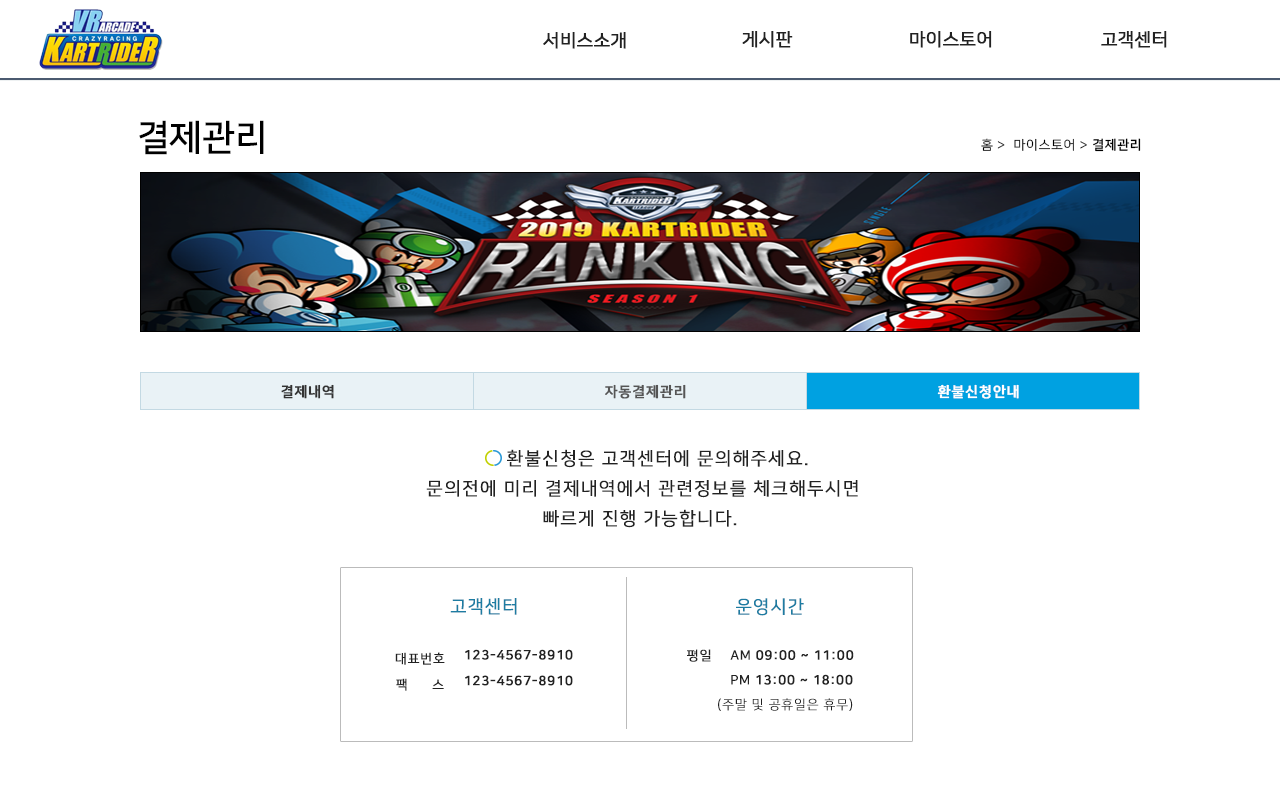
<style>
.page{position:relative;width:1280px;height:786px;background:#ffffff}
.page>*{position:absolute;margin:0}
.t1{font:18px "NanumSquareR";color:#222222;font-weight:bold}
.t2{font:36px "NanumSquareB";color:#000000}
.t3{font:13px "NanumSquareR";letter-spacing:0.05em;color:#000000}
.t4{font:13px "NanumSquareB";letter-spacing:0.05em;color:#000000}
.t5{font:14px "NanumSquareB";letter-spacing:0.05em;color:#333333;font-weight:bold}
.t6{font:14px "NanumSquareB";letter-spacing:0.05em;color:#555555;font-weight:bold}
.t7{font:14px "NanumSquareB";letter-spacing:0.05em;color:#ffffff;font-weight:bold}
.t8{font:18px/30px "NanumSquareR";letter-spacing:0.05em;color:#222222;text-transform:uppercase;font-weight:bold}
.t9{font:18px "NanumSquareR";letter-spacing:0.05em;color:#1d7ca2;text-transform:uppercase;font-weight:bold}
.t10{font:13px "NanumSquareR";letter-spacing:0.05em;color:#222222;text-transform:uppercase;font-weight:bold}
.t11{font:13px "NanumSquareB";letter-spacing:0.05em;color:#222222;text-transform:uppercase;font-weight:bold}
.t12{font:13px "NanumSquareR";letter-spacing:1.9em;color:#222222;text-transform:uppercase;font-weight:bold}
.t13{font:13px "NanumSquareL";letter-spacing:0.05em;color:#222222;text-transform:uppercase;font-weight:bold}
</style>
<div class="page">
<p class="t1" style="left:742px;top:30px;width:51px;height:18px">게시판</p>
<p class="t1" style="left:910px;top:30px;width:82px;height:18px">마이스토어</p>
<p class="t1" style="left:1101px;top:30px;width:66px;height:18px">고객센터</p>
<p class="t1" style="left:543px;top:31px;width:83px;height:18px">서비스소개</p>
<p class="t2" style="left:139px;top:120px;width:125px;height:35px">결제관리</p>
<p class="t3" style="left:981px;top:138px;width:160px;height:14px">홈 &gt;  마이스토어 &gt; <span class="t4">결제관리</span></p>
<p class="t5" style="left:281px;top:384px;width:53px;height:15px">결제내역</p>
<p class="t6" style="left:605px;top:384px;width:81px;height:15px">자동결제관리</p>
<p class="t7" style="left:937px;top:384px;width:82px;height:15px">환불신청안내</p>
<p class="t8" style="left:426px;top:449px;width:432px;height:79px;text-align:center">환불신청은 고객센터에 문의해주세요.<br>문의전에 미리 결제내역에서 관련정보를 체크해두시면<br>빠르게 진행 가능합니다.</p>
<p class="t9" style="left:450px;top:598px;width:67px;height:17px">고객센터</p>
<p class="t9" style="left:736px;top:598px;width:68px;height:18px">운영시간</p>
<p class="t10" style="left:395px;top:652px;width:50px;height:13px">대표번호</p>
<p class="t11" style="left:465px;top:649px;width:108px;height:11px">123-4567-8910</p>
<p class="t10" style="left:687px;top:649px;width:24px;height:13px">평일</p>
<p class="t11" style="left:730px;top:650px;width:124px;height:10px"><span class="t10">AM </span>09:00 ~ 11:00</p>
<p class="t12" style="left:396px;top:678px;width:48px;height:13px">팩<span class="t10">스</span></p>
<p class="t11" style="left:465px;top:675px;width:108px;height:11px">123-4567-8910</p>
<p class="t11" style="left:731px;top:674px;width:122px;height:11px"><span class="t10">pM </span>13:00 ~ 18:00</p>
<p class="t13" style="left:718px;top:698px;width:135px;height:13px">(주말 및 공휴일은 휴무)</p>
</div>
